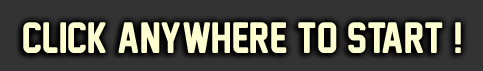
<style>
.page{position:relative;width:483px;height:71px;background:#333333}
.page>*{position:absolute;margin:0}
.t1{font:40px "Jetpackia";color:#feffd1}
</style>
<div class="page">
<p class="t1" style="left:23px;top:22px;width:438px;height:31px">click anywhere to start !</p>
</div>
